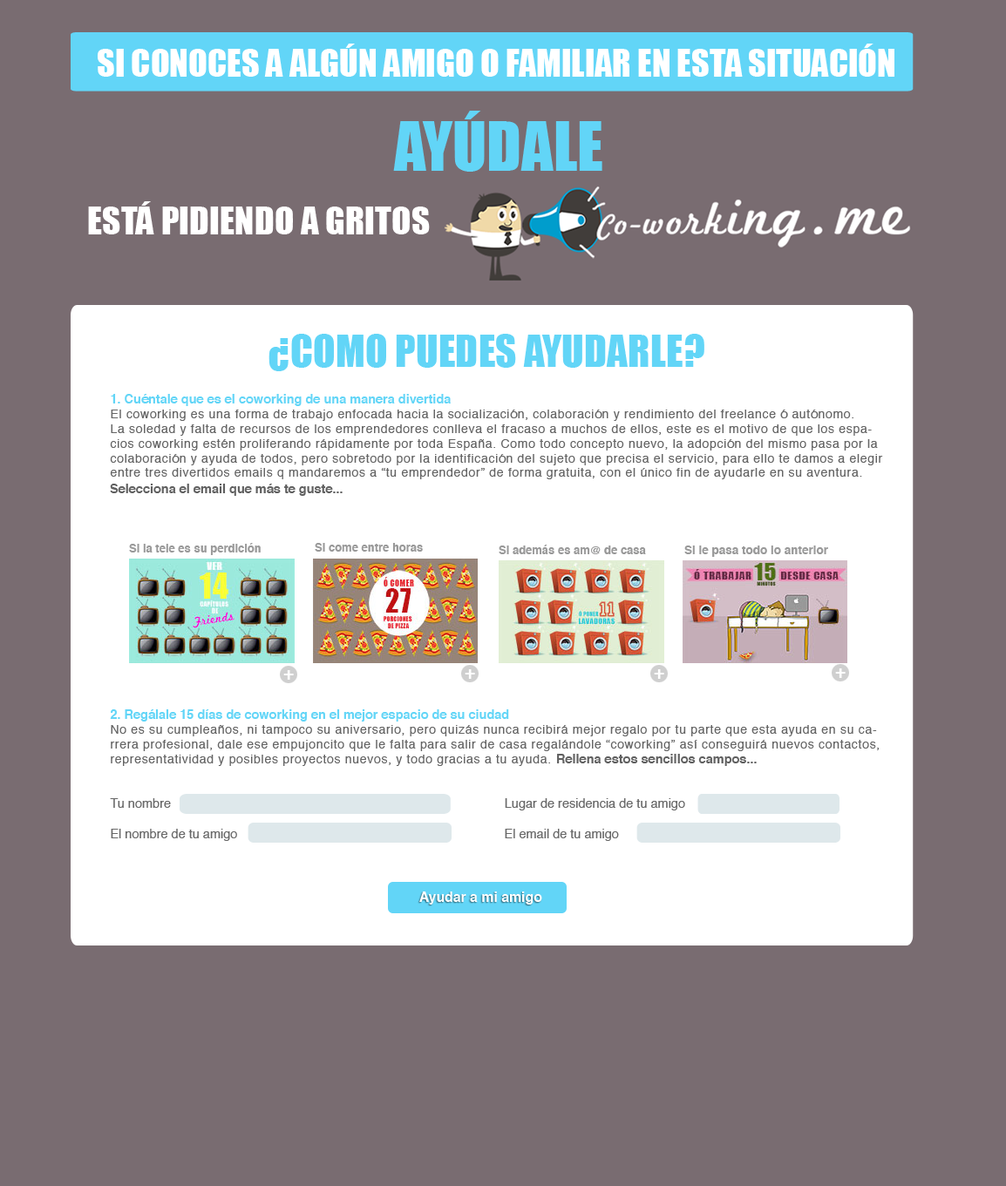
<style>
.page{position:relative;width:1006px;height:1186px;background:#796c71}
.page>*{position:absolute;margin:0}
.t1{font:34.9px "Impact";color:#ffffff;text-transform:uppercase}
.t2{font:63px "Impact";color:#62d5f7}
.t3{font:41.2px "Impact";color:#62d5f7}
.t4{font:12.2px "Helvetica";letter-spacing:0.05em;color:#656565}
.t5{font:12.6px "Helvetica-Bold";color:#62d5f7}
.t6{font:12.6px "Helvetica";color:#686868}
.t7{font:12.6px "Helvetica-Bold";color:#606060}
.t8{font:11.3px "Helvetica-Bold";color:#9a9a9a}
.t9{font:11.3px "Helvetica-Bold";color:#999999}
.t10{font:11.8px "Helvetica-Bold";color:#999999}
.t11{font:17.9px "Helvetica-Bold";color:#ffffff}
.t12{font:13.8px "Helvetica-Bold";color:#ffffff}
</style>
<div class="page">
<p class="t1" style="left:98px;top:44px;width:796px;height:33px">Si conoces a algún amigo o familiar en esta situación</p>
<p class="t2" style="left:393px;top:111px;width:209px;height:61px">AYÚDALE</p>
<p class="t3" style="left:268px;top:334px;width:436px;height:37px">¿COMO PUEDES AYUDARLE?</p>
<p class="t4" style="left:110px;top:394px;width:773px;height:447px"><span class="t5">1. Cuéntale que es el coworking de una manera divertida<br></span>El coworking es una forma de trabajo enfocada hacia la socialización, colaboración y rendimiento del freelance ó autónomo. <br>La soledad y falta de recursos de los emprendedores conlleva el fracaso a muchos de ellos, este es el motivo de que los espacios coworking estén proliferando rápidamente por toda España. Como todo concepto nuevo, la adopción del mismo pasa por la colaboración y ayuda de todos, pero sobretodo por la identificación del sujeto que precisa el servicio, para ello te damos a elegir entre tres divertidos emails q mandaremos a “tu emprendedor” de forma gratuita, con el único fin de ayudarle en su aventura.<br><br><span class="t5"><br><br><br><br><br><br><br><br><br><br><br><br><br><br>2. Regálale 15 días de coworking en el mejor espacio de su ciudad<br></span>No es su cumpleaños, ni tampoco su aniversario, pero quizás nunca recibirá mejor regalo por tu parte que esta ayuda en su carrera profesional, dale ese empujoncito que le falta para salir de casa regalándole “coworking” así conseguirá nuevos contactos, representatividad y posibles proyectos nuevos, y todo gracias a tu ayuda.<br><br><span class="t6"><br>Tu nombre                                                                                               Lugar de residencia de tu amigo                                       <br><br>El nombre de tu amigo                                                                            El email de tu amigo</span></p>
<p class="t7" style="left:110px;top:484px;width:232px;height:12px">Selecciona el email que más te guste...</p>
<p class="t8" style="left:129px;top:543px;width:132px;height:12px">Si la tele es su perdición</p>
<p class="t9" style="left:315px;top:543px;width:108px;height:9px">Si come entre horas</p>
<p class="t9" style="left:498px;top:545px;width:148px;height:9px">Si además es am@ de casa</p>
<p class="t10" style="left:684px;top:545px;width:144px;height:12px">Si le pasa todo lo anterior</p>
<p class="t11" style="left:283px;top:670px;width:11px;height:10px">+</p>
<p class="t11" style="left:464px;top:669px;width:11px;height:10px">+</p>
<p class="t11" style="left:654px;top:669px;width:10px;height:10px">+</p>
<p class="t11" style="left:835px;top:668px;width:10px;height:10px">+</p>
<p class="t7" style="left:557px;top:754px;width:199px;height:12px">Rellena estos sencillos campos...</p>
<p class="t12" style="left:419px;top:891px;width:123px;height:13px">Ayudar a mi amigo</p>
</div>
